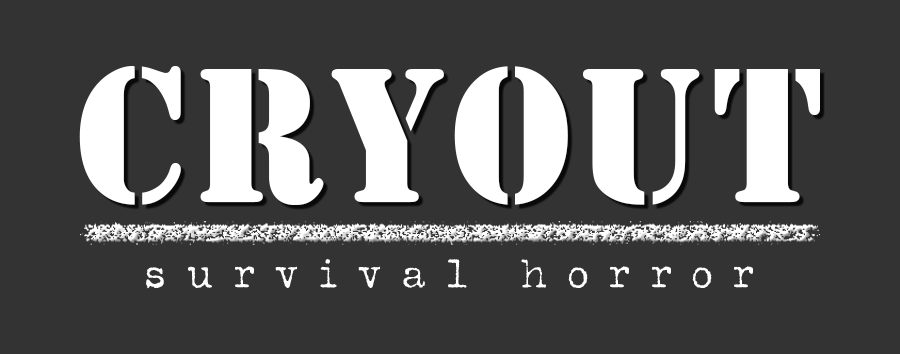
<style>
.page{position:relative;width:900px;height:354px;background:#333333}
.page>*{position:absolute;margin:0}
.t1{font:200px "Stencil";letter-spacing:0.03em;color:#ffffff;scale:0.95 1}
.t2{font:41.7px "Typeka-Regular";letter-spacing:0.53em;color:#ffffff;scale:0.95 1}
</style>
<div class="page">
<p class="t1" style="left:79px;top:66px;width:741px;height:139px">CRYOUT</p>
<p class="t2" style="left:146px;top:259px;width:607px;height:30px">survival horror</p>
</div>
